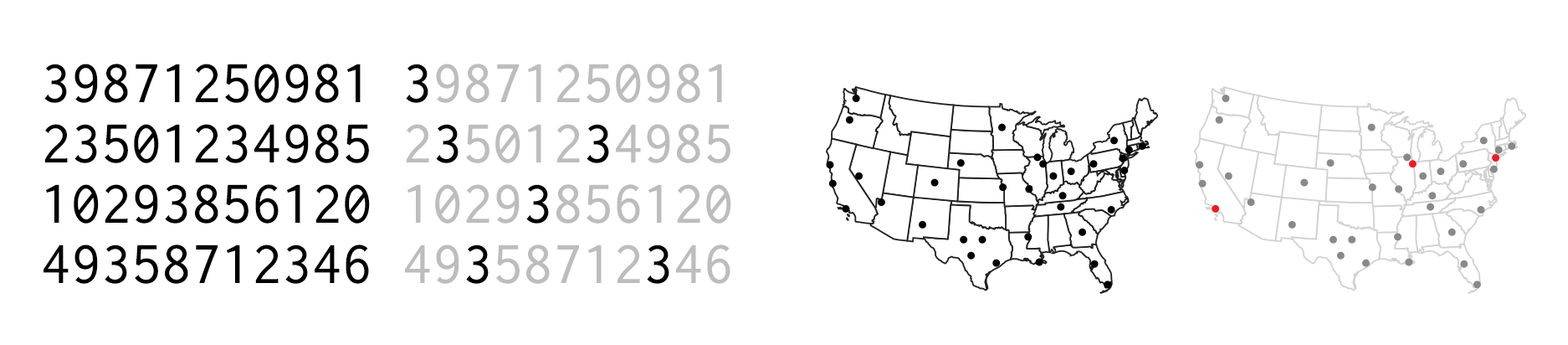
<style>
.page{position:relative;width:1568px;height:345px;background:#ffffff}
.page>*{position:absolute;margin:0}
.t1{font:60.2px/60.2px "Inconsolata";color:#000000}
.t2{font:60.2px/60.2px "Inconsolata";color:#bdbdbd}
</style>
<div class="page">
<p class="t1" style="left:44px;top:64px;width:326px;height:220px">39871250981235012349851029385612049358712346</p>
<p class="t2" style="left:405px;top:64px;width:326px;height:220px"><span class="t1">3</span>98712509812<span class="t1">3</span>5012<span class="t1">3</span>49851029<span class="t1">3</span>85612049<span class="t1">3</span>58712<span class="t1">3</span>46</p>
</div>
